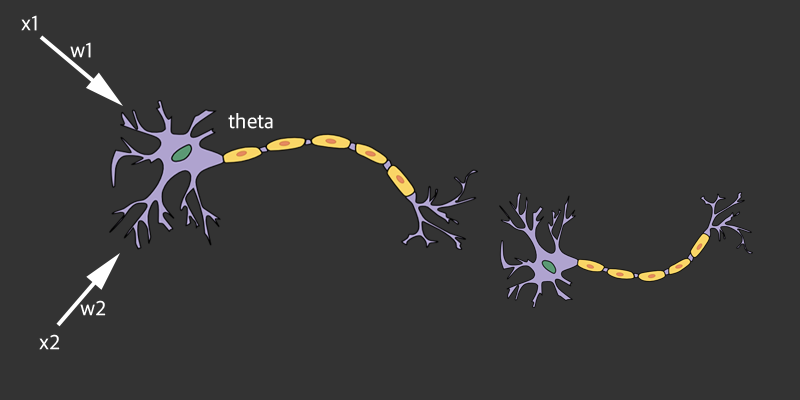
<style>
.page{position:relative;width:800px;height:400px;background:#333333}
.page>*{position:absolute;margin:0}
.t1{font:20.9px "AppleSDGothicNeo-Regular";color:#ffffff}
</style>
<div class="page">
<p class="t1" style="left:21px;top:15px;width:16px;height:16px">x1</p>
<p class="t1" style="left:70px;top:42px;width:21px;height:16px">w1</p>
<p class="t1" style="left:228px;top:113px;width:45px;height:16px">theta</p>
<p class="t1" style="left:80px;top:300px;width:26px;height:16px">w2</p>
<p class="t1" style="left:39px;top:334px;width:21px;height:16px">x2</p>
</div>
